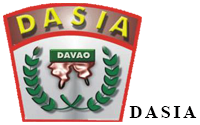
<style>
.page{position:relative;width:200px;height:125px;background:#ffffff}
.page>*{position:absolute;margin:0}
.t1{font:18px "TimesNewRomanPS-BoldMT";letter-spacing:0.15em;color:#010000}
</style>
<div class="page">
<p class="t1" style="left:129px;top:106px;width:68px;height:12px">DASIA</p>
</div>
